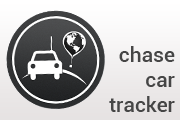
<style>
.page{position:relative;width:180px;height:120px}
.page>*{position:absolute;margin:0}
.t1{font:21px "Roboto-Medium";color:#464646}
</style>
<div class="page">
<p class="t1" style="left:109px;top:46px;width:66px;height:66px;text-align:right">chase<br>car<br>tracker</p>
</div>
